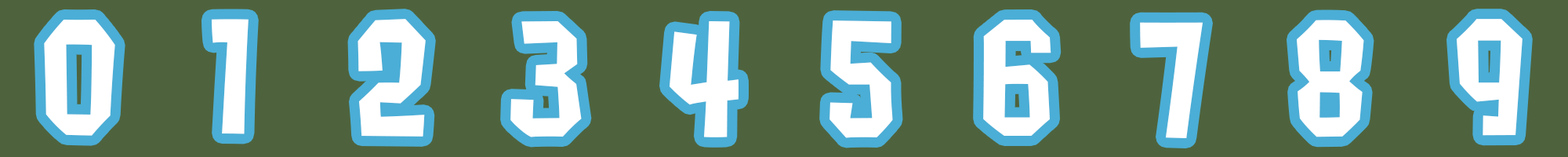
<style>
.page{position:relative;width:1568px;height:157px;background:#4e633d}
.page>*{position:absolute;margin:0}
.t1{font:156.8px "Splat2K";letter-spacing:0.155em;color:#ffffff}
</style>
<div class="page">
<p class="t1" style="left:44px;top:20px;width:71px;height:116px">0</p>
<p class="t1" style="left:212px;top:19px;width:37px;height:115px">1</p>
<p class="t1" style="left:358px;top:19px;width:68px;height:117px">2</p>
<p class="t1" style="left:510px;top:21px;width:72px;height:116px">3</p>
<p class="t1" style="left:670px;top:21px;width:69px;height:116px">4</p>
<p class="t1" style="left:829px;top:20px;width:64px;height:118px">5</p>
<p class="t1" style="left:983px;top:20px;width:68px;height:116px">6</p>
<p class="t1" style="left:1140px;top:22px;width:63px;height:116px">7</p>
<p class="t1" style="left:1297px;top:20px;width:67px;height:117px">8</p>
<p class="t1" style="left:1457px;top:19px;width:66px;height:117px">9</p>
</div>
